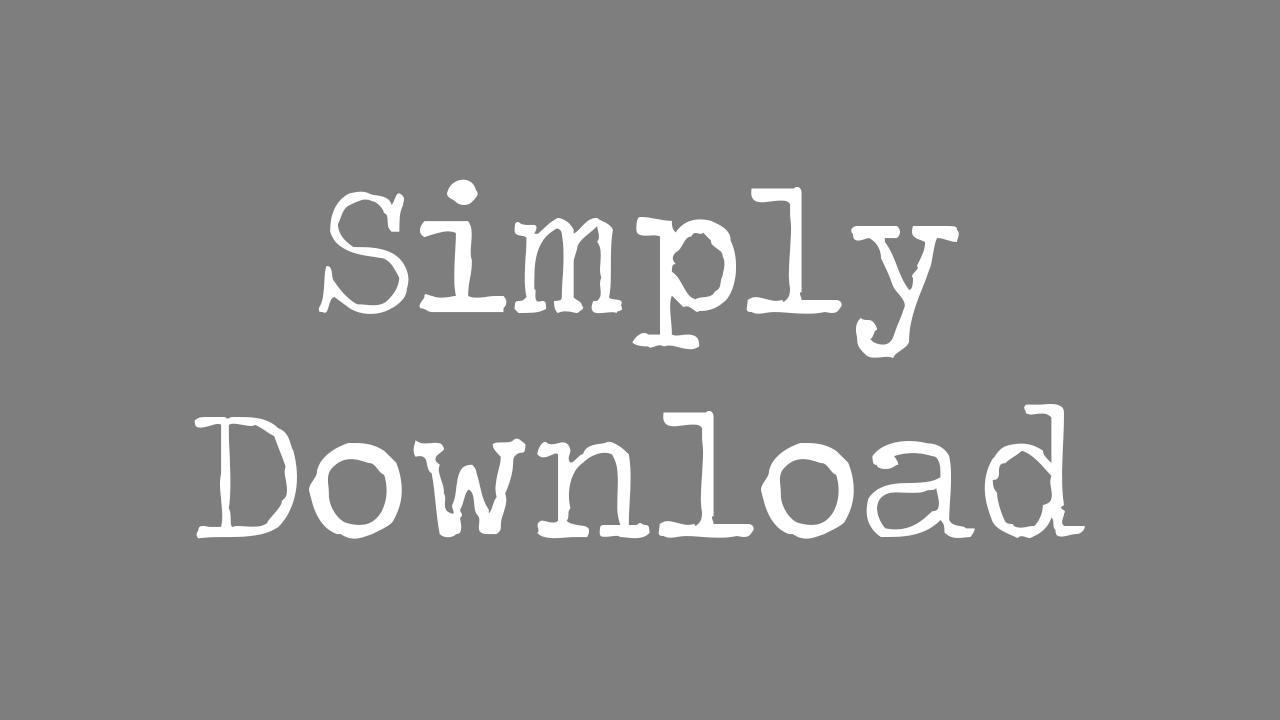
<style>
.page{position:relative;width:1280px;height:720px;background:#7e7e7e}
.page>*{position:absolute;margin:0}
.t1{font:186.4px "TravelingTypewriter";color:#ffffff}
</style>
<div class="page">
<p class="t1" style="left:194px;top:179px;width:891px;height:360px;text-align:center">Simply<br>Download</p>
</div>
